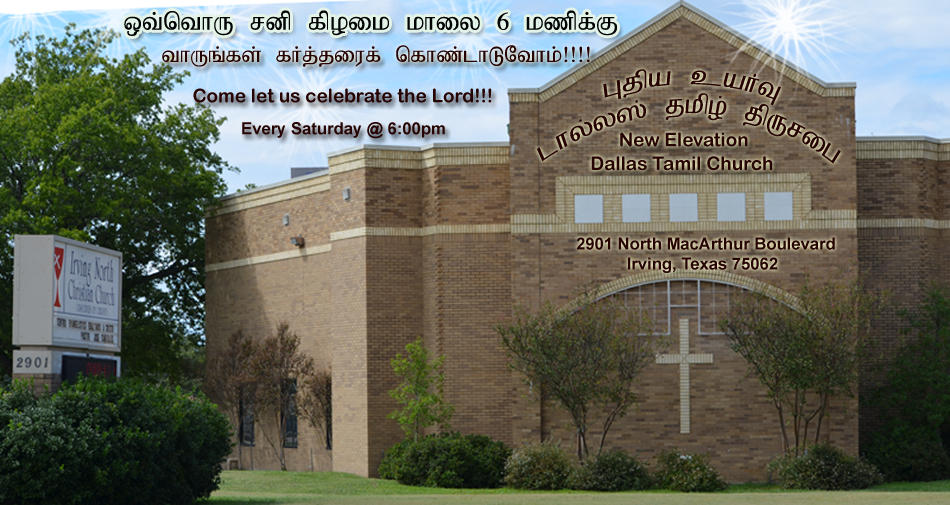
<style>
.page{position:relative;width:950px;height:505px}
.page>*{position:absolute;margin:0}
.t1{font:28.5px "Bamini-Plain";color:#000203}
.t2{font:25px "Bamini-Plain";color:#250403}
.t3{font:30.9px "Bamini-Plain";color:#250403;scale:0.83 1}
.t4{font:19px "ArialRoundedMTBold";color:#250403}
.t5{font:16.6px "Arial-BoldMT";color:#250403}
</style>
<div class="page">
<p class="t1" style="left:124px;top:10px;width:493px;height:26px">xt;nthU rdp fpoik khiy 6 kzpf;F</p>
<p class="t2" style="left:162px;top:45px;width:428px;height:22px">thUq;fs; fHj;jiuf; nfhz;lhLNthk;!!!!</p>
<p class="t3" style="left:603px;top:69px;width:178px;height:37px;rotate:32deg">Gjpa caHT</p>
<p class="t4" style="left:193px;top:88px;width:299px;height:15px">Come let us celebrate the Lord!!!</p>
<p class="t3" style="left:537px;top:93px;width:304px;height:71px;rotate:15deg">lhy;y]; jkpo; jpUrig</p>
<p class="t5" style="left:242px;top:122px;width:203px;height:17px">Every Saturday @ 6:00pm</p>
<p class="t4" style="left:620px;top:132px;width:128px;height:15px">New Elevation</p>
<p class="t4" style="left:591px;top:156px;width:182px;height:15px">Dallas Tamil Church</p>
<p class="t5" style="left:576px;top:237px;width:259px;height:36px">2901 North MacArthur Boulevard <br>           Irving, Texas 75062</p>
</div>
